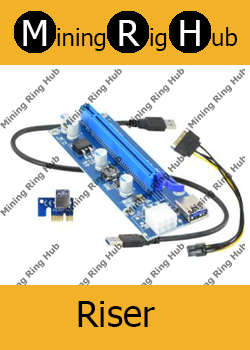
<style>
.page{position:relative;width:250px;height:350px;background:#ffffff}
.page>*{position:absolute;margin:0}
.t1{font:36px "Tahoma";color:#ffffff}
.t2{font:24px "Tahoma";color:#000000}
.t3{font:36px "Tahoma";color:#000000}
</style>
<div class="page">
<p class="t1" style="left:23px;top:20px;width:24px;height:26px">M</p>
<p class="t2" style="left:57px;top:28px;width:49px;height:23px">ining</p>
<p class="t1" style="left:119px;top:20px;width:21px;height:26px">R</p>
<p class="t2" style="left:150px;top:28px;width:17px;height:23px">ig</p>
<p class="t1" style="left:180px;top:20px;width:20px;height:26px">H</p>
<p class="t2" style="left:212px;top:27px;width:26px;height:19px">ub</p>
<p class="t3" style="left:78px;top:301px;width:77px;height:26px">Riser</p>
</div>
